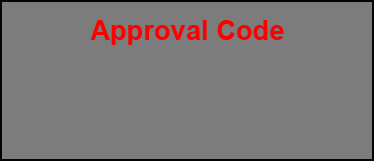
<style>
.page{position:relative;width:374px;height:161px;background:#7c7c7c}
.page>*{position:absolute;margin:0}
.t1{font:27.3px "Arial-BoldMT";color:#ff0000}
</style>
<div class="page">
<p class="t1" style="left:90px;top:20px;width:194px;height:25px">Approval Code</p>
</div>
